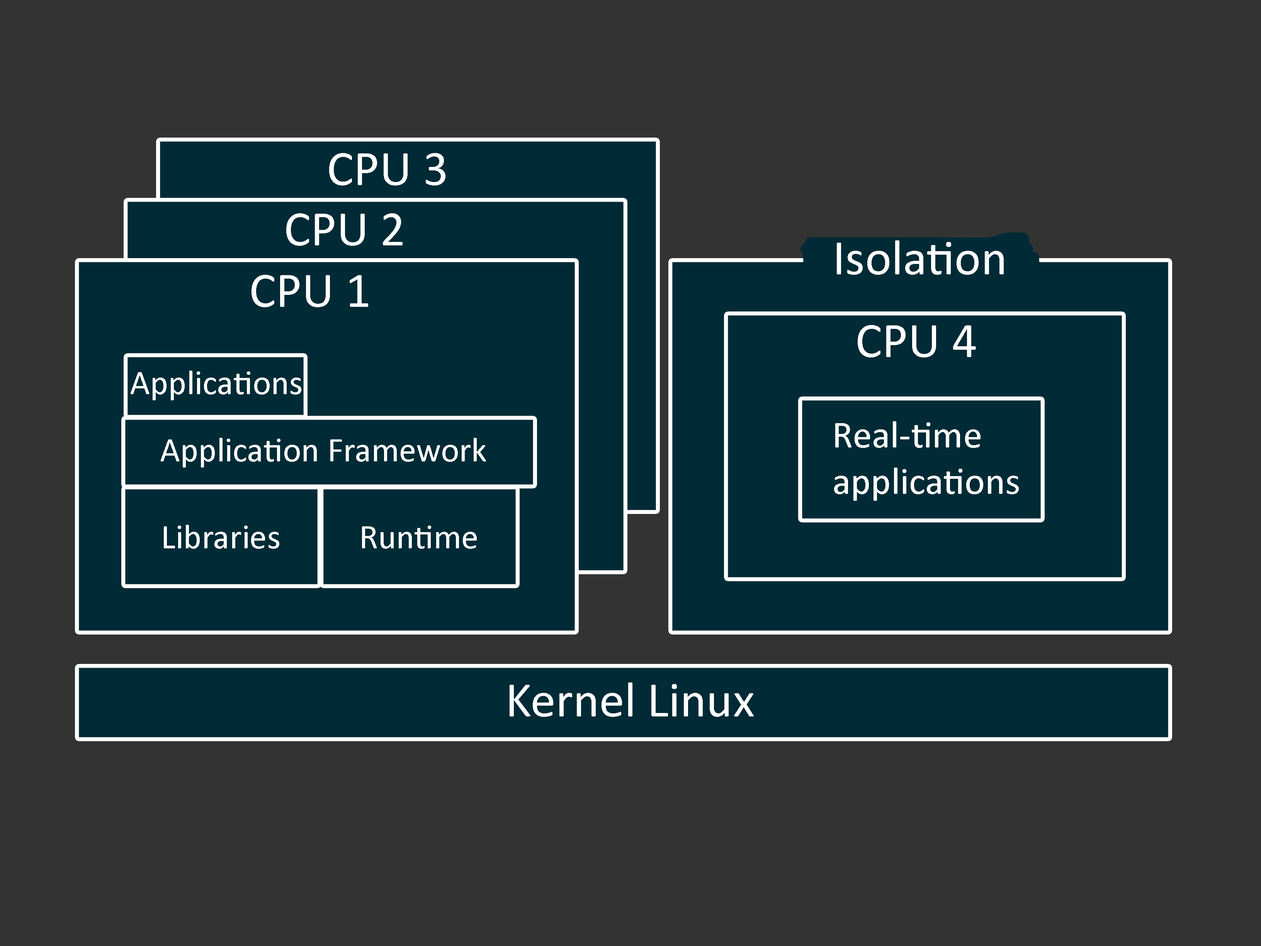
<style>
.page{position:relative;width:1261px;height:946px;background:#333333}
.page>*{position:absolute;margin:0}
.t1{font:50.2px "Calibri";color:#ffffff}
.t2{font:34.8px "Calibri";color:#ffffff}
.t3{font:38.6px "Calibri";color:#ffffff}
</style>
<div class="page">
<p class="t1" style="left:329px;top:153px;width:116px;height:32px">CPU 3</p>
<p class="t1" style="left:286px;top:213px;width:117px;height:33px">CPU 2</p>
<p class="t1" style="left:837px;top:240px;width:167px;height:35px">Isolation</p>
<p class="t1" style="left:251px;top:275px;width:117px;height:32px">CPU 1</p>
<p class="t1" style="left:858px;top:325px;width:118px;height:32px">CPU 4</p>
<p class="t2" style="left:131px;top:370px;width:170px;height:30px">Applications</p>
<p class="t3" style="left:834px;top:421px;width:185px;height:80px">Real-time<br>applications</p>
<p class="t2" style="left:161px;top:438px;width:325px;height:29px">Application Framework</p>
<p class="t2" style="left:164px;top:525px;width:115px;height:24px">Libraries</p>
<p class="t2" style="left:362px;top:525px;width:115px;height:24px">Runtime</p>
<p class="t1" style="left:510px;top:682px;width:244px;height:35px">Kernel Linux</p>
</div>
